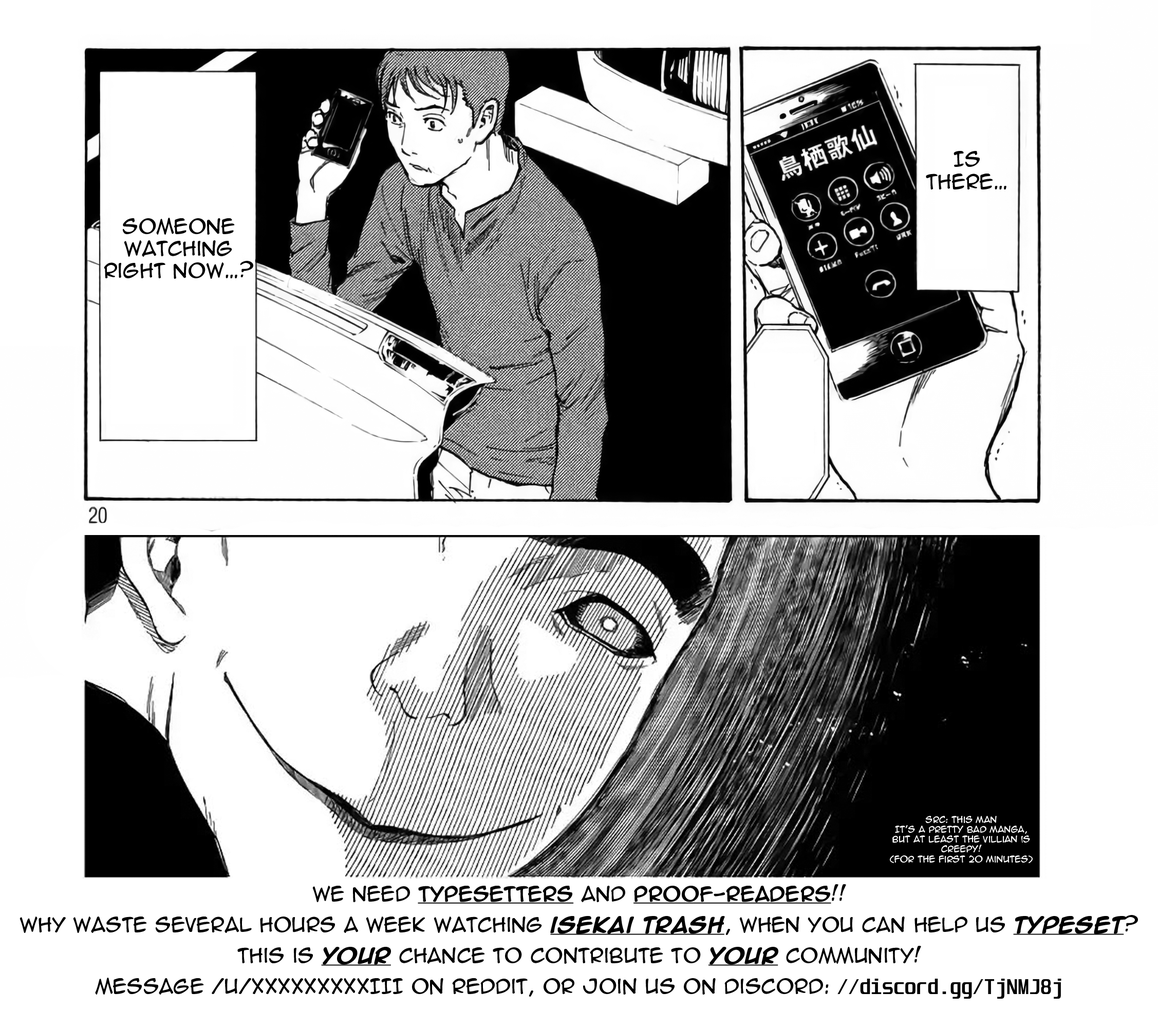
<style>
.page{position:relative;width:1158px;height:1030px;background:#ffffff}
.page>*{position:absolute;margin:0}
.t1{font:18.5px "AnimeAce2.0BB";color:#000000}
.t2{font:8.2px "AnimeAce2.0BB";color:#ffffff}
.t3{font:18.5px/30.8px "AnimeAce2.0BB";color:#000000}
.t4{font:18.5px/30.8px "AnimeAce2.0BB";color:#000000;font-weight:bold;text-decoration:underline}
.t5{font:18.5px/30.8px "AnimeAce2.0BB-Bold";color:#000000;font-weight:bold;text-decoration:underline}
.t6{font:18.5px/30.8px "Unispace-Bold";color:#000000}
</style>
<div class="page">
<p class="t1" style="left:925px;top:151px;width:81px;height:38px;text-align:center">Is there…</p>
<p class="t1" style="left:104px;top:218px;width:149px;height:61px;text-align:center">Someone watching right now…?</p>
<p class="t2" style="left:889px;top:816px;width:143px;height:47px;text-align:center">Src: This man<br>It’s a pretty bad manga, but at least the villian is creepy! <br>(for the first 20 minutes)</p>
<p class="t3" style="left:20px;top:884px;width:1117px;height:115px;text-align:center">We need <span class="t4">typesetters</span> and <span class="t4">proof-readers</span>!! <br>why waste several hours a week watching <span class="t5">isekai trash</span>, when you can help us <span class="t5">typeset</span>?<br>This is <span class="t5">your</span> chance to contribute to <span class="t5">your</span> community!<br>Message /u/XXXXXXXXXIII on reddit, or join us on discord: <span class="t6">//discord.gg/TjNMJ8j</span></p>
</div>
